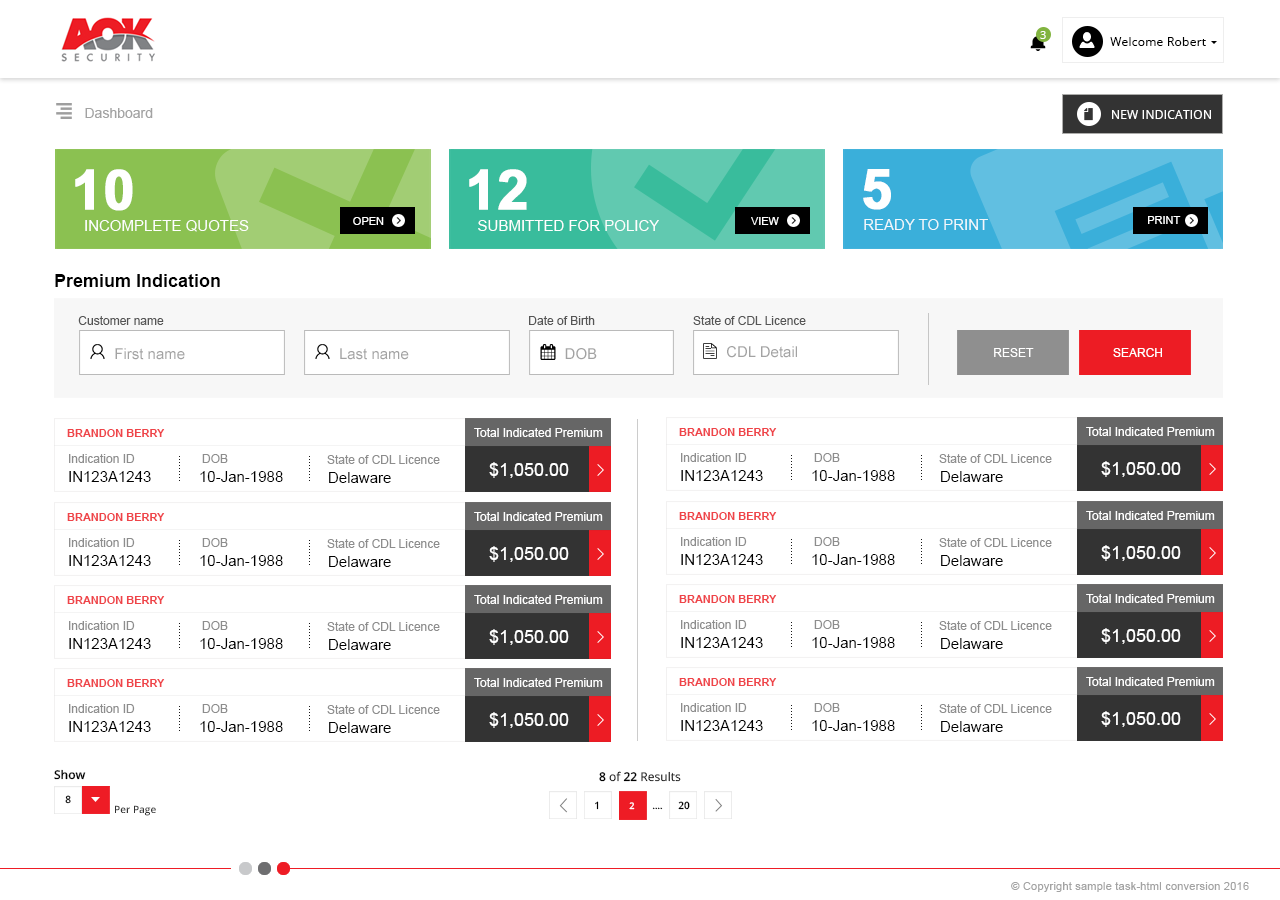
<style>
.page{position:relative;width:1280px;height:900px;background:#ffffff}
.page>*{position:absolute;margin:0}
.t1{font:11px "OpenSans";letter-spacing:0.02em;color:#ffffff}
.t2{font:12px "OpenSans";letter-spacing:0.02em;color:#000000}
.t3{font:14px "ArialMT";color:#a3a3a3}
.t4{font:12px "OpenSans";letter-spacing:0.02em;color:#ffffff;text-transform:uppercase}
.t5{font:55px "Arial-BoldMT";color:#ffffff;font-weight:bold}
.t6{font:15px "ArialMT";color:#ffffff;text-transform:uppercase}
.t7{font:11px "ArialMT";color:#ffffff;text-transform:uppercase}
.t8{font:18px "Arial-BoldMT";color:#000000}
.t9{font:12px "ArialMT";color:#555555}
.t10{font:15px "ArialMT";color:#a3a3a3}
.t11{font:12px "ArialMT";color:#ffffff;text-transform:uppercase}
.t12{font:11px "Arial-BoldMT";color:#ef4449;text-transform:uppercase}
.t13{font:12px "ArialMT";color:#ffffff}
.t14{font:12px "ArialMT";color:#8d8d8d}
.t15{font:18px "ArialMT";color:#ffffff}
.t16{font:15px "ArialMT";color:#000000}
.t17{font:12px "OpenSans-Semibold";color:#000000}
.t18{font:12px "OpenSans";color:#000000}
.t19{font:10px "OpenSans-Semibold";color:#000000}
.t20{font:10px "OpenSans-Semibold";color:#343434}
.t21{font:9px "OpenSans-Semibold";color:#ffffff}
.t22{font:9px "OpenSans-Semibold"}
.t23{font:11px "ArialMT";letter-spacing:0.02em;color:#a3a3a3}
</style>
<div class="page">
<p class="t1" style="left:1040px;top:31px;width:6px;height:8px">3</p>
<p class="t2" style="left:1110px;top:37px;width:96px;height:9px">Welcome Robert</p>
<p class="t3" style="left:85px;top:108px;width:68px;height:10px">Dashboard</p>
<p class="t4" style="left:1112px;top:110px;width:99px;height:9px">New Indication</p>
<p class="t5" style="left:75px;top:169px;width:58px;height:42px">10</p>
<p class="t5" style="left:469px;top:169px;width:58px;height:41px">12</p>
<p class="t5" style="left:863px;top:169px;width:28px;height:41px">5</p>
<p class="t6" style="left:85px;top:220px;width:164px;height:12px">Incomplete Quotes</p>
<p class="t7" style="left:353px;top:217px;width:31px;height:8px">open</p>
<p class="t6" style="left:478px;top:220px;width:181px;height:11px">Submitted for policy</p>
<p class="t7" style="left:751px;top:217px;width:28px;height:8px">View</p>
<p class="t6" style="left:864px;top:219px;width:124px;height:11px;opacity:0.9">REady to print</p>
<p class="t7" style="left:1148px;top:216px;width:33px;height:8px">Print</p>
<p class="t8" style="left:55px;top:274px;width:165px;height:13px">Premium Indication</p>
<p class="t9" style="left:78px;top:316px;width:86px;height:9px">Customer name</p>
<p class="t9" style="left:529px;top:316px;width:66px;height:9px">Date of Birth</p>
<p class="t9" style="left:693px;top:316px;width:113px;height:9px">State of CDL Licence</p>
<p class="t10" style="left:115px;top:348px;width:70px;height:12px">First name</p>
<p class="t10" style="left:340px;top:348px;width:69px;height:12px">Last name</p>
<p class="t10" style="left:565px;top:348px;width:32px;height:12px">DOB</p>
<p class="t10" style="left:727px;top:346px;width:70px;height:12px">CDL Detail</p>
<p class="t11" style="left:994px;top:348px;width:40px;height:9px">Reset</p>
<p class="t11" style="left:1113px;top:348px;width:49px;height:9px">Search</p>
<p class="t12" style="left:67px;top:429px;width:98px;height:8px">Brandon Berry</p>
<p class="t13" style="left:474px;top:428px;width:129px;height:9px">Total Indicated Premium</p>
<p class="t12" style="left:679px;top:428px;width:98px;height:8px">Brandon Berry</p>
<p class="t13" style="left:1086px;top:427px;width:129px;height:9px">Total Indicated Premium</p>
<p class="t14" style="left:69px;top:454px;width:66px;height:9px">Indication ID</p>
<p class="t14" style="left:202px;top:454px;width:26px;height:9px">DOB</p>
<p class="t14" style="left:327px;top:455px;width:113px;height:9px">State of CDL Licence</p>
<p class="t15" style="left:489px;top:462px;width:80px;height:16px">$1,050.00</p>
<p class="t14" style="left:681px;top:453px;width:66px;height:9px">Indication ID</p>
<p class="t14" style="left:814px;top:453px;width:26px;height:9px">DOB</p>
<p class="t14" style="left:939px;top:454px;width:113px;height:9px">State of CDL Licence</p>
<p class="t15" style="left:1101px;top:461px;width:80px;height:16px">$1,050.00</p>
<p class="t16" style="left:69px;top:471px;width:82px;height:11px">IN123A1243</p>
<p class="t16" style="left:200px;top:471px;width:83px;height:11px">10-Jan-1988</p>
<p class="t16" style="left:329px;top:472px;width:62px;height:11px">Delaware</p>
<p class="t16" style="left:681px;top:470px;width:82px;height:11px">IN123A1243</p>
<p class="t16" style="left:812px;top:470px;width:83px;height:11px">10-Jan-1988</p>
<p class="t16" style="left:941px;top:471px;width:62px;height:11px">Delaware</p>
<p class="t12" style="left:67px;top:513px;width:98px;height:8px">Brandon Berry</p>
<p class="t13" style="left:474px;top:512px;width:129px;height:9px">Total Indicated Premium</p>
<p class="t12" style="left:679px;top:512px;width:98px;height:8px">Brandon Berry</p>
<p class="t13" style="left:1086px;top:511px;width:129px;height:9px">Total Indicated Premium</p>
<p class="t14" style="left:69px;top:538px;width:66px;height:9px">Indication ID</p>
<p class="t14" style="left:202px;top:538px;width:26px;height:9px">DOB</p>
<p class="t14" style="left:327px;top:539px;width:113px;height:9px">State of CDL Licence</p>
<p class="t14" style="left:681px;top:537px;width:66px;height:9px">Indication ID</p>
<p class="t14" style="left:814px;top:537px;width:26px;height:9px">DOB</p>
<p class="t14" style="left:939px;top:538px;width:113px;height:9px">State of CDL Licence</p>
<p class="t15" style="left:1101px;top:545px;width:80px;height:16px">$1,050.00</p>
<p class="t16" style="left:69px;top:555px;width:82px;height:11px">IN123A1243</p>
<p class="t16" style="left:200px;top:555px;width:83px;height:11px">10-Jan-1988</p>
<p class="t16" style="left:329px;top:556px;width:62px;height:11px">Delaware</p>
<p class="t15" style="left:489px;top:546px;width:80px;height:16px">$1,050.00</p>
<p class="t16" style="left:681px;top:554px;width:82px;height:11px">IN123A1243</p>
<p class="t16" style="left:812px;top:554px;width:83px;height:11px">10-Jan-1988</p>
<p class="t16" style="left:941px;top:555px;width:62px;height:11px">Delaware</p>
<p class="t12" style="left:67px;top:596px;width:98px;height:8px">Brandon Berry</p>
<p class="t13" style="left:474px;top:595px;width:129px;height:9px">Total Indicated Premium</p>
<p class="t12" style="left:679px;top:595px;width:98px;height:8px">Brandon Berry</p>
<p class="t13" style="left:1086px;top:594px;width:129px;height:9px">Total Indicated Premium</p>
<p class="t14" style="left:69px;top:621px;width:66px;height:9px">Indication ID</p>
<p class="t14" style="left:202px;top:621px;width:26px;height:9px">DOB</p>
<p class="t14" style="left:327px;top:622px;width:113px;height:9px">State of CDL Licence</p>
<p class="t15" style="left:489px;top:629px;width:80px;height:16px">$1,050.00</p>
<p class="t14" style="left:681px;top:620px;width:66px;height:9px">Indication ID</p>
<p class="t14" style="left:814px;top:620px;width:26px;height:9px">DOB</p>
<p class="t14" style="left:939px;top:621px;width:113px;height:9px">State of CDL Licence</p>
<p class="t15" style="left:1101px;top:628px;width:80px;height:16px">$1,050.00</p>
<p class="t16" style="left:69px;top:638px;width:82px;height:11px">IN123A1243</p>
<p class="t16" style="left:200px;top:638px;width:83px;height:11px">10-Jan-1988</p>
<p class="t16" style="left:329px;top:639px;width:62px;height:11px">Delaware</p>
<p class="t16" style="left:681px;top:637px;width:82px;height:11px">IN123A1243</p>
<p class="t16" style="left:812px;top:637px;width:83px;height:11px">10-Jan-1988</p>
<p class="t16" style="left:941px;top:638px;width:62px;height:11px">Delaware</p>
<p class="t13" style="left:474px;top:678px;width:129px;height:9px">Total Indicated Premium</p>
<p class="t12" style="left:679px;top:678px;width:98px;height:8px">Brandon Berry</p>
<p class="t13" style="left:1086px;top:677px;width:129px;height:9px">Total Indicated Premium</p>
<p class="t12" style="left:67px;top:679px;width:98px;height:8px">Brandon Berry</p>
<p class="t14" style="left:69px;top:704px;width:66px;height:9px">Indication ID</p>
<p class="t14" style="left:202px;top:704px;width:26px;height:9px">DOB</p>
<p class="t14" style="left:327px;top:705px;width:113px;height:9px">State of CDL Licence</p>
<p class="t15" style="left:489px;top:712px;width:80px;height:16px">$1,050.00</p>
<p class="t14" style="left:681px;top:703px;width:66px;height:9px">Indication ID</p>
<p class="t14" style="left:814px;top:703px;width:26px;height:9px">DOB</p>
<p class="t14" style="left:939px;top:704px;width:113px;height:9px">State of CDL Licence</p>
<p class="t15" style="left:1101px;top:711px;width:80px;height:16px">$1,050.00</p>
<p class="t16" style="left:69px;top:721px;width:82px;height:11px">IN123A1243</p>
<p class="t16" style="left:200px;top:721px;width:83px;height:11px">10-Jan-1988</p>
<p class="t16" style="left:329px;top:722px;width:62px;height:11px">Delaware</p>
<p class="t16" style="left:681px;top:720px;width:82px;height:11px">IN123A1243</p>
<p class="t16" style="left:812px;top:720px;width:83px;height:11px">10-Jan-1988</p>
<p class="t16" style="left:941px;top:721px;width:62px;height:11px">Delaware</p>
<p class="t17" style="left:54px;top:769px;width:32px;height:11px">Show</p>
<p class="t18" style="left:599px;top:771px;width:82px;height:11px"><span class="t17">8</span> of <span class="t17">22</span> Results</p>
<p class="t19" style="left:65px;top:795px;width:6px;height:9px">8</p>
<p class="t20" style="left:115px;top:805px;width:41px;height:11px">Per Page</p>
<p class="t19" style="left:595px;top:801px;width:4px;height:9px">1</p>
<p class="t21" style="left:629px;top:802px;width:6px;height:8px">2</p>
<p class="t22" style="left:652px;top:807px;width:11px;height:3px">....</p>
<p class="t19" style="left:678px;top:801px;width:12px;height:9px">20</p>
<p class="t23" style="left:1011px;top:882px;width:238px;height:10px">© Copyright sample task-html conversion 2016</p>
</div>
